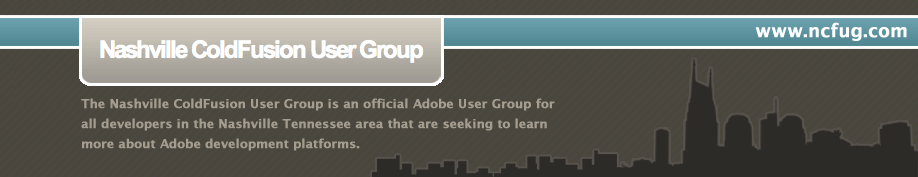
<style>
.page{position:relative;width:918px;height:177px}
.page>*{position:absolute;margin:0}
.t1{font:18px "LucidaGrande-Bold";color:#ffffff;font-weight:bold}
.t2{font:12px/20px "LucidaGrande-Bold";color:#a49c8f;font-weight:bold}
</style>
<div class="page">
<p class="t1" style="left:755px;top:22px;width:152px;height:19px">www.ncfug.com</p>
<p class="t2" style="left:81px;top:98px;width:474px;height:53px">The Nashville ColdFusion User Group is an official Adobe User Group for<br>all developers in the Nashville Tennessee area that are seeking to learn<br>more about Adobe development platforms.</p>
</div>
